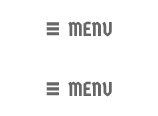
<style>
.page{position:relative;width:158px;height:116px;background:#ffffff}
.page>*{position:absolute;margin:0}
.t1{font:30px "FranklinGothic-DemiCond";color:#666666}
.t2{font:20px "GermaniaOne-Regular";color:#666666}
</style>
<div class="page">
<p class="t1" style="left:46px;top:22px;width:13px;height:14px">≡</p>
<p class="t2" style="left:68px;top:21px;width:44px;height:16px">MENU</p>
<p class="t1" style="left:46px;top:82px;width:13px;height:14px">≡</p>
<p class="t2" style="left:68px;top:81px;width:44px;height:16px">MENU</p>
</div>
